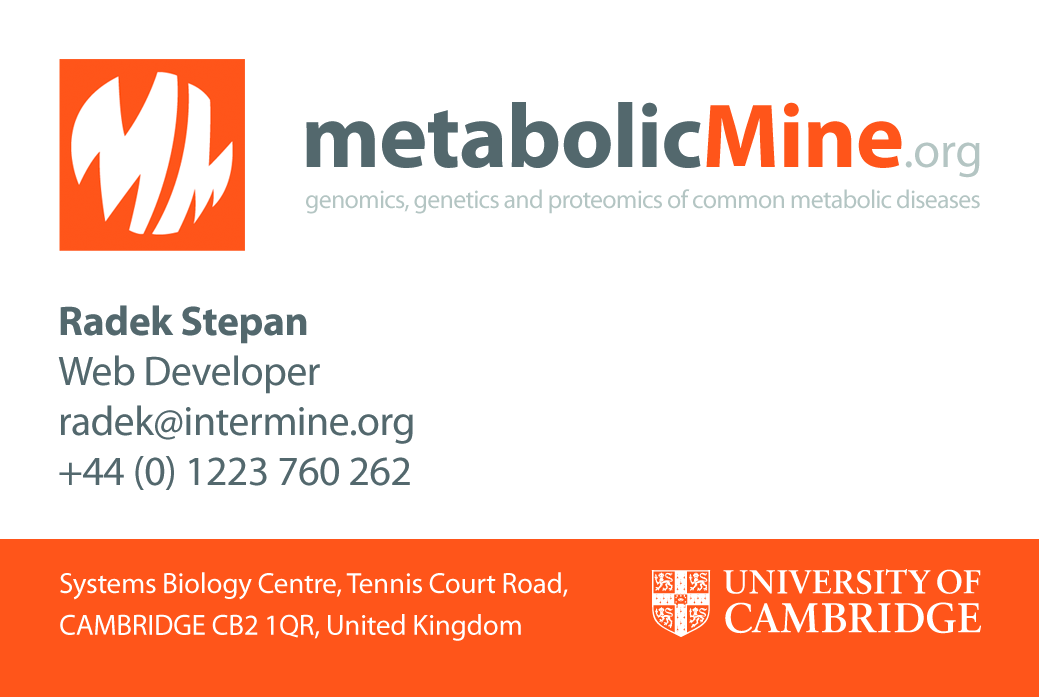
<style>
.page{position:relative;width:1039px;height:697px;background:#ffffff}
.page>*{position:absolute;margin:0}
.t1{font:91.7px "MyriadPro-Bold";letter-spacing:-0.01em;color:#53686d}
.t2{font:91.7px "MyriadPro-Bold";letter-spacing:-0.01em;color:#ff551a}
.t3{font:49.6px "MyriadPro-Regular";letter-spacing:-0.01em;color:#b3c5c3}
.t4{font:26px "MyriadPro-Regular";letter-spacing:-0.03em;color:#b3c5c3}
.t5{font:41.7px "MyriadPro-Regular";letter-spacing:-0.01em;color:#53686d}
.t6{font:41.7px "MyriadPro-Bold";letter-spacing:-0.01em;color:#53686d}
.t7{font:29.2px/41.7px "MyriadPro-Regular";letter-spacing:-0.01em;color:#ffffff}
</style>
<div class="page">
<p class="t1" style="left:306px;top:102px;width:674px;height:76px">metabolic<span class="t2">Mine</span><span class="t3">.org</span></p>
<p class="t4" style="left:306px;top:189px;width:674px;height:25px">genomics, genetics and proteomics of common metabolic diseases</p>
<p class="t5" style="left:58px;top:305px;width:355px;height:185px"><span class="t6">Radek Stepan<br></span>Web Developer<br>radek@intermine.org<br>+44 (0) 1223 760 262</p>
<p class="t7" style="left:60px;top:572px;width:508px;height:69px">Systems Biology Centre, Tennis Court Road,<br>CAMBRIDGE CB2 1QR, United Kingdom</p>
</div>
